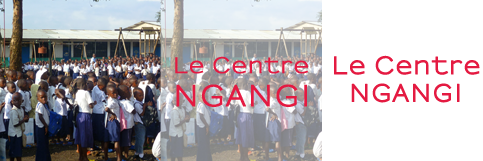
<style>
.page{position:relative;width:483px;height:161px;background:#ffffff}
.page>*{position:absolute;margin:0}
.t1{font:23px "Sansumi-Bold";letter-spacing:0.06em;color:#e41a41;font-weight:bold}
</style>
<div class="page">
<p class="t1" style="left:334px;top:55px;width:146px;height:48px;text-align:center">Le Centre<br>NGANGI</p>
</div>
